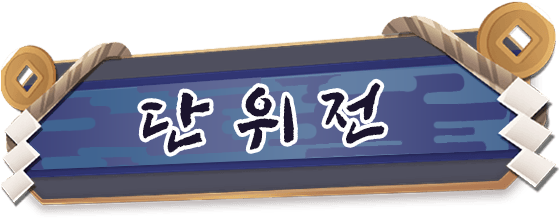
<style>
.page{position:relative;width:560px;height:218px;background:#ffffff}
.page>*{position:absolute;margin:0}
.t1{font:74px "SangSangRockOTF";letter-spacing:0.38em;color:#1b142d}
.t2{font:74px "SangSangRockOTF";letter-spacing:0.34em;color:#1b142d}
</style>
<div class="page">
<p class="t1" style="left:141px;top:82px;width:244px;height:71px;rotate:-3deg"><span class="t2">단</span>위전</p>
</div>
